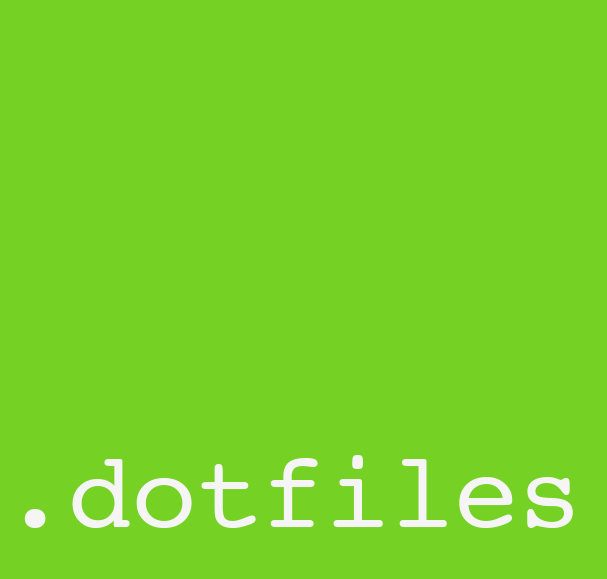
<style>
.page{position:relative;width:607px;height:579px;background:#76d125}
.page>*{position:absolute;margin:0}
.t1{font:184px "Courier";color:#f5f5f5}
</style>
<div class="page">
<p class="t1" style="left:24px;top:455px;width:549px;height:73px">.dotfiles</p>
</div>
